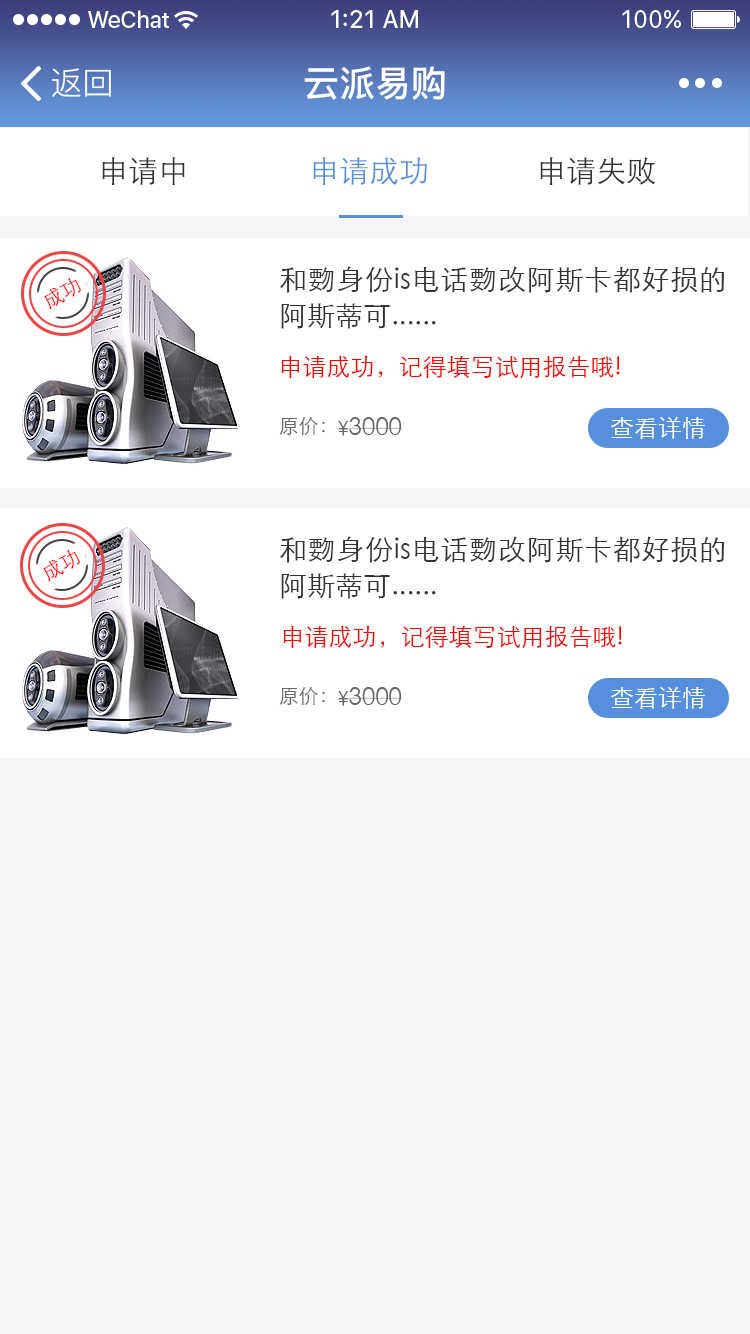
<style>
.page{position:relative;width:750px;height:1334px;background:#f4f5f6}
.page>*{position:absolute;margin:0}
.t1{font:32px "PingFang-SC-Regular";color:#ffffff}
.t2{font:36px "PingFang-SC-Bold";color:#ffffff}
.t3{font:30px "STXihei";color:#333333}
.t4{font:30px "STXihei";color:#568fdc}
.t5{font:28px/36px "STXihei";color:#333333}
.t6{font:20px "STXihei";color:#fe0000}
.t7{font:24px "STXihei";color:#ff0000}
.t8{font:20px "STXihei";color:#666666}
.t9{font:24px "STXihei";color:#666666}
.t10{font:24px "STXihei";color:#ffffff}
</style>
<div class="page">
<p class="t1" style="left:52px;top:68px;width:59px;height:29px">返回</p>
<p class="t2" style="left:304px;top:66px;width:141px;height:34px">云派易购</p>
<p class="t3" style="left:102px;top:157px;width:83px;height:28px">申请中</p>
<p class="t4" style="left:313px;top:157px;width:114px;height:28px">申请成功</p>
<p class="t3" style="left:540px;top:157px;width:116px;height:28px">申请失败</p>
<p class="t5" style="left:280px;top:266px;width:445px;height:63px;text-align:justify">和覅身份is电话覅改阿斯卡都好损的阿斯蒂可......</p>
<p class="t6" style="left:44px;top:278px;width:37px;height:32px;rotate:-30deg">成功</p>
<p class="t7" style="left:281px;top:355px;width:339px;height:23px">申请成功，记得填写试用报告哦!</p>
<p class="t8" style="left:279px;top:417px;width:46px;height:19px">原价：</p>
<p class="t9" style="left:337px;top:417px;width:65px;height:19px"><span class="t8">¥</span>3000</p>
<p class="t10" style="left:610px;top:417px;width:95px;height:22px">查看详情</p>
<p class="t5" style="left:280px;top:536px;width:445px;height:63px;text-align:justify">和覅身份is电话覅改阿斯卡都好损的阿斯蒂可......</p>
<p class="t6" style="left:43px;top:550px;width:37px;height:32px;rotate:-30deg">成功</p>
<p class="t7" style="left:283px;top:625px;width:339px;height:23px">申请成功，记得填写试用报告哦!</p>
<p class="t8" style="left:279px;top:687px;width:46px;height:19px">原价：</p>
<p class="t9" style="left:337px;top:687px;width:65px;height:19px"><span class="t8">¥</span>3000</p>
<p class="t10" style="left:610px;top:687px;width:95px;height:22px">查看详情</p>
</div>
